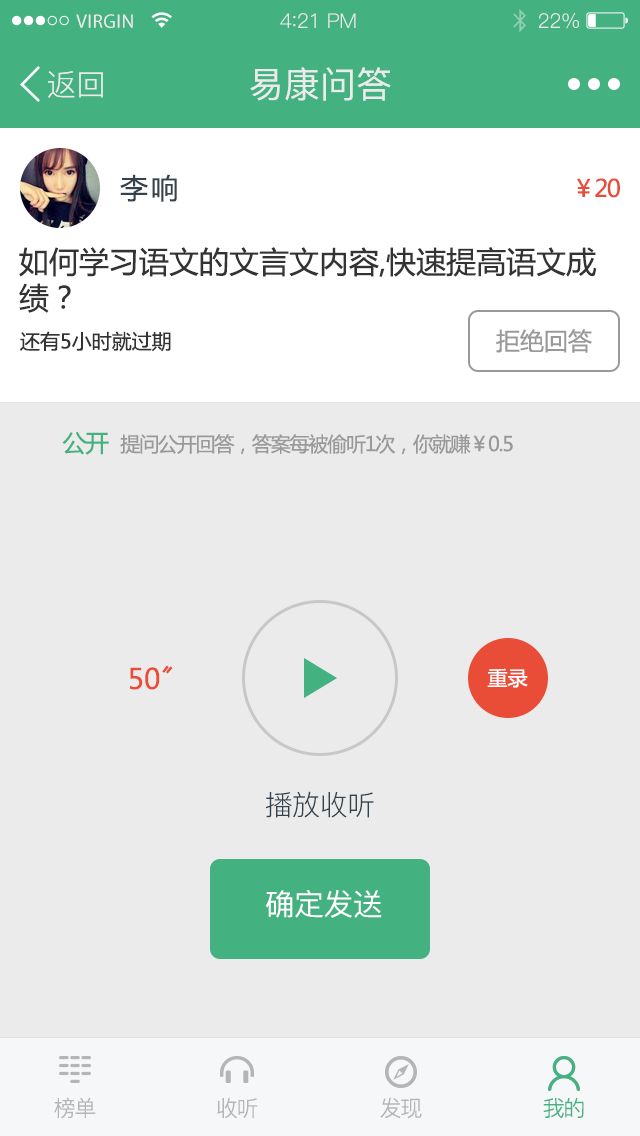
<style>
.page{position:relative;width:640px;height:1136px;background:#ebebeb}
.page>*{position:absolute;margin:0}
.t1{font:19.6px "MyriadPro-Regular";letter-spacing:0.02em;color:#ebebeb}
.t2{font:20.4px "PingFang-SC-Regular";letter-spacing:-0.02em;color:#ebebeb}
.t3{font:22.1px "PingFang-SC-Regular";letter-spacing:-0.02em;color:#ebebeb}
.t4{font:30px "PingFang-SC-Regular";color:#ebebeb}
.t5{font:36px "PingFang-SC-Medium";color:#ebebeb}
.t6{font:28px "MicrosoftYaHei";letter-spacing:0.1em;color:#35424b}
.t7{font:24px "MicrosoftYaHei";letter-spacing:-0.06em;color:#e94c37}
.t8{font:30px/36px "MicrosoftYaHei";color:#333333}
.t9{font:24px "MicrosoftYaHei";color:#999999}
.t10{font:20px "MicrosoftYaHei";color:#333333}
.t11{font:24px "MicrosoftYaHei";letter-spacing:-0.06em;color:#44b181}
.t12{font:20px "MicrosoftYaHei";letter-spacing:-0.06em;color:#999999}
.t13{font:28px "MicrosoftYaHei";color:#e94c37}
.t14{font:20px "MicrosoftYaHei";color:#ffffff}
.t15{font:28px "PingFang-SC-Regular";letter-spacing:-0.02em;color:#35424b}
.t16{font:30px "PingFang-SC-Medium";letter-spacing:-0.02em;color:#ffffff}
.t17{font:22px "PingFang-SC-Regular";letter-spacing:-0.06em;color:#b4b5b6}
.t18{font:22px "PingFang-SC-Regular";letter-spacing:-0.06em;color:#44b181}
</style>
<div class="page">
<p class="t1" style="left:76px;top:14px;width:57px;height:14px">VIRGIN</p>
<p class="t2" style="left:280px;top:13px;width:76px;height:15px">4<span class="t3">:</span>21 PM</p>
<p class="t2" style="left:539px;top:13px;width:40px;height:16px">22%</p>
<p class="t4" style="left:48px;top:71px;width:55px;height:27px">返回</p>
<p class="t5" style="left:250px;top:67px;width:141px;height:34px">易康问答</p>
<p class="t6" style="left:120px;top:174px;width:57px;height:28px">李响</p>
<p class="t7" style="left:577px;top:178px;width:43px;height:20px">￥20</p>
<p class="t8" style="left:19px;top:247px;width:578px;height:66px">如何学习语文的文言文内容,快速提高语文成<br>绩？</p>
<p class="t9" style="left:496px;top:329px;width:96px;height:24px">拒绝回答</p>
<p class="t10" style="left:20px;top:331px;width:151px;height:21px">还有5小时就过期</p>
<p class="t11" style="left:62px;top:431px;width:47px;height:24px">公开</p>
<p class="t12" style="left:120px;top:434px;width:393px;height:20px">提问公开回答，答案每被偷听1次，你就赚￥0.5</p>
<p class="t13" style="left:130px;top:665px;width:43px;height:25px">50〞</p>
<p class="t14" style="left:487px;top:668px;width:41px;height:20px">重录</p>
<p class="t15" style="left:266px;top:791px;width:108px;height:27px">播放收听</p>
<p class="t16" style="left:266px;top:890px;width:116px;height:28px">确定发送</p>
<p class="t17" style="left:54px;top:1097px;width:42px;height:22px">榜单</p>
<p class="t17" style="left:380px;top:1097px;width:42px;height:22px">发现</p>
<p class="t18" style="left:543px;top:1097px;width:41px;height:21px">我的</p>
<p class="t17" style="left:217px;top:1098px;width:41px;height:21px">收听</p>
</div>
